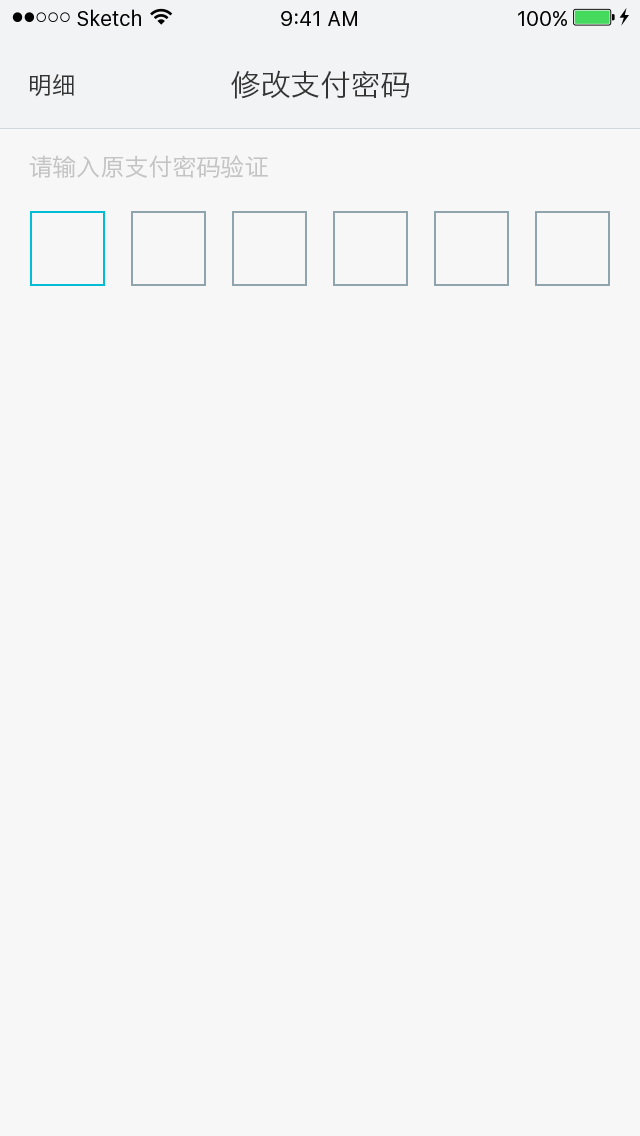
<style>
.page{position:relative;width:640px;height:1136px;background:#f7f7f7}
.page>*{position:absolute;margin:0}
.t1{font:24px "HiraginoSansGB-W3";color:#333333}
.t2{font:30px "HiraginoSansGB-W3";color:#333333}
.t3{font:24px "HiraginoSansGB-W3";color:#c4c4c4}
</style>
<div class="page">
<p class="t1" style="left:29px;top:74px;width:45px;height:23px">明细</p>
<p class="t2" style="left:231px;top:70px;width:178px;height:29px">修改支付密码</p>
<p class="t3" style="left:29px;top:155px;width:239px;height:23px">请输入原支付密码验证</p>
</div>
